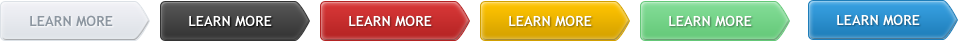
<style>
.page{position:relative;width:958px;height:41px}
.page>*{position:absolute;margin:0}
.t1{font:14px "TrebuchetMS-Bold";color:#8c96a0;text-transform:uppercase}
.t2{font:14px "TrebuchetMS-Bold";color:#ffffff;text-transform:uppercase}
</style>
<div class="page">
<p class="t1" style="left:30px;top:15px;width:83px;height:11px">Learn more</p>
<p class="t2" style="left:189px;top:15px;width:83px;height:11px">Learn more</p>
<p class="t2" style="left:349px;top:15px;width:83px;height:11px">Learn more</p>
<p class="t2" style="left:509px;top:15px;width:83px;height:11px">Learn more</p>
<p class="t2" style="left:669px;top:15px;width:83px;height:11px">Learn More</p>
<p class="t2" style="left:837px;top:14px;width:83px;height:11px">Learn more</p>
</div>
